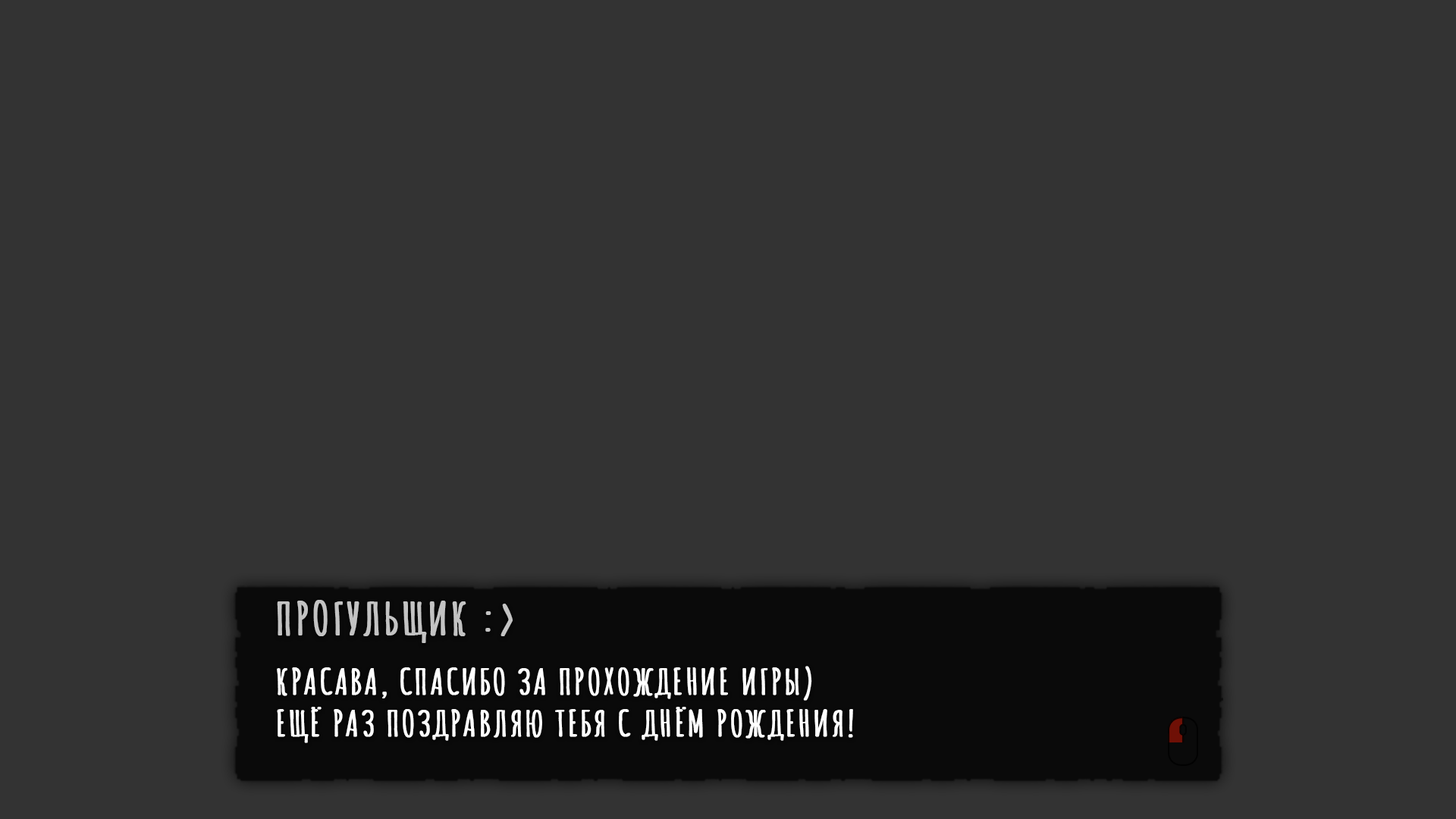
<style>
.page{position:relative;width:1456px;height:819px;background:#333333}
.page>*{position:absolute;margin:0}
.t1{font:43.7px "AmaticSC-Bold";letter-spacing:0.04em;color:#c3c3c3;font-weight:bold;scale:1.08 1}
.t2{font:34.8px "AmaticSC-Bold";letter-spacing:0.04em;color:#ffffff;font-weight:bold;scale:1.08 1}
</style>
<div class="page">
<p class="t1" style="left:277px;top:600px;width:236px;height:43px">ПРОГУЛЬЩИК :&gt;</p>
<p class="t2" style="left:277px;top:666px;width:576px;height:77px">КРАСАВА, СПАСИБО ЗА ПРОХОЖДЕНИЕ ИГРЫ)<br>ЕЩЁ РАЗ ПОЗДРАВЛЯЮ ТЕБЯ С ДНЁМ РОЖДЕНИЯ!</p>
</div>
